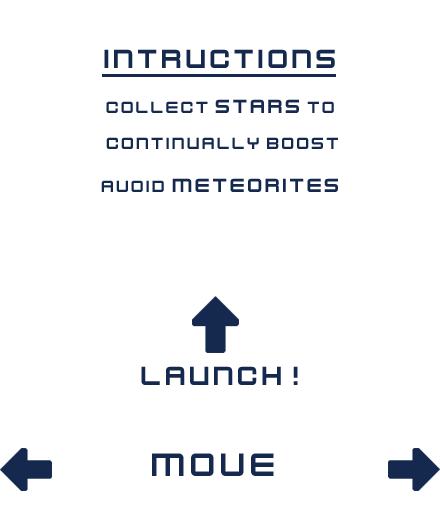
<style>
.page{position:relative;width:440px;height:530px;background:#ffffff}
.page>*{position:absolute;margin:0}
.t1{font:29px "KenVector-Future";color:#15294e}
.t2{font:18px/36px "KenVector-Future";color:#15294e}
.t3{font:29px/61px "KenVector-Future";color:#15294e}
.t4{font:21px/36px "KenVector-Future";color:#15294e}
.t5{font:18px/43px "KenVector-Future";color:#15294e}
.t6{font:21px/43px "KenVector-Future";color:#15294e}
.t7{font:36px "KenVector-Future";color:#15294e}
</style>
<div class="page">
<p class="t1" style="left:104px;top:49px;width:231px;height:19px">intructionS</p>
<p class="t2" style="left:101px;top:99px;width:237px;height:93px;text-align:center"><span class="t3"><br></span>Collect <span class="t4">STArs</span> to<br> continually booST<br><span class="t5">AVOID</span><span class="t6"> METEORITES</span></p>
<p class="t1" style="left:141px;top:366px;width:157px;height:19px">launch!</p>
<p class="t7" style="left:152px;top:453px;width:122px;height:23px">MOVE</p>
</div>
